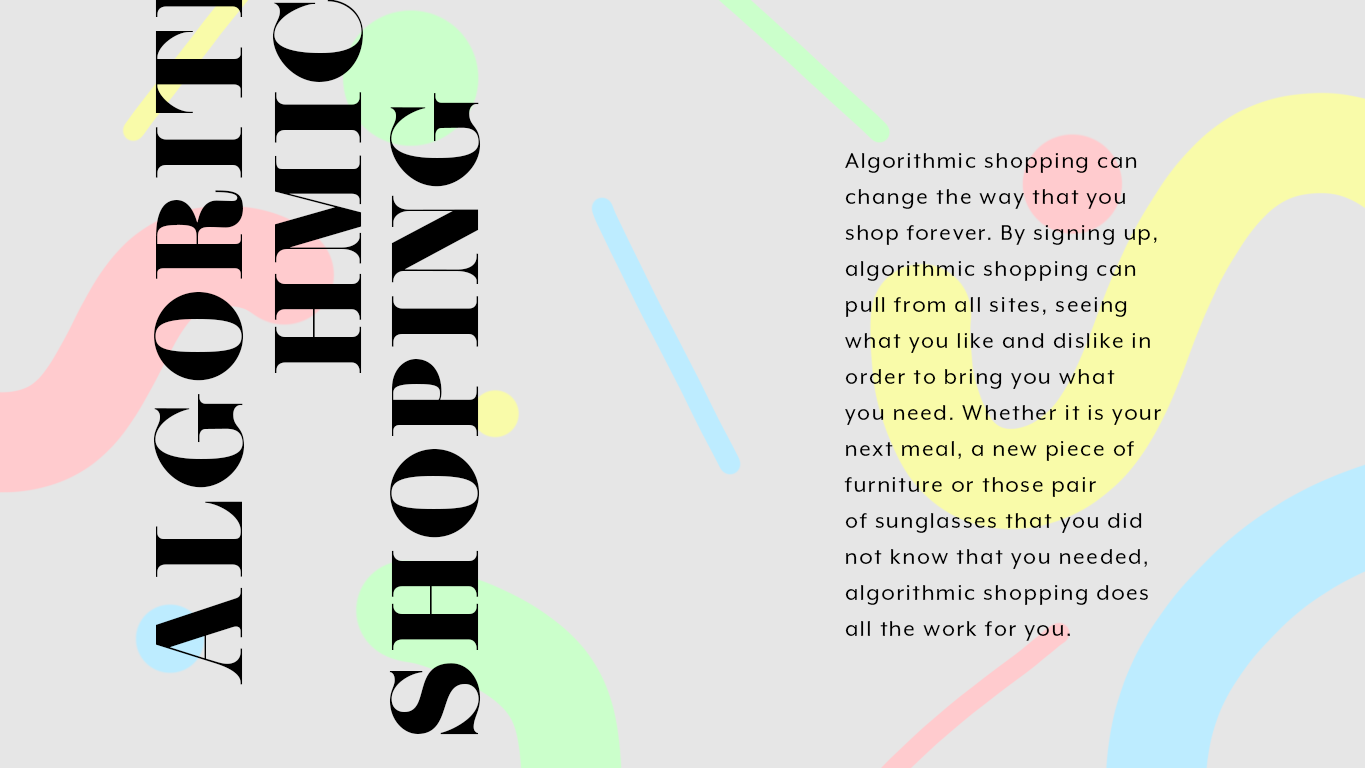
<style>
.page{position:relative;width:1366px;height:768px;background:#e6e6e6}
.page>*{position:absolute;margin:0}
.t1{font:107.9px "EloquentJFPro-Regular";letter-spacing:0.08em;color:#000000}
.t2{font:24px/36px "MrEavesXLModOT-Reg";letter-spacing:0.08em;color:#000000}
</style>
<div class="page">
<p class="t1" style="left:272px;top:0px;width:91px;height:373px;rotate:-90deg">HMIC</p>
<p class="t1" style="left:389px;top:93px;width:92px;height:642px;rotate:-90deg">SHOPING</p>
<p class="t2" style="left:844px;top:153px;width:317px;height:488px">Algorithmic shopping can change the way that you shop forever. By signing up, algorithmic shopping can pull from all sites, seeing what you like and dislike in order to bring you what <br>you need. Whether it is your next meal, a new piece of furniture or those pair <br>of sunglasses that you did not know that you needed, <br>algorithmic shopping does <br>all the work for you.</p>
</div>
